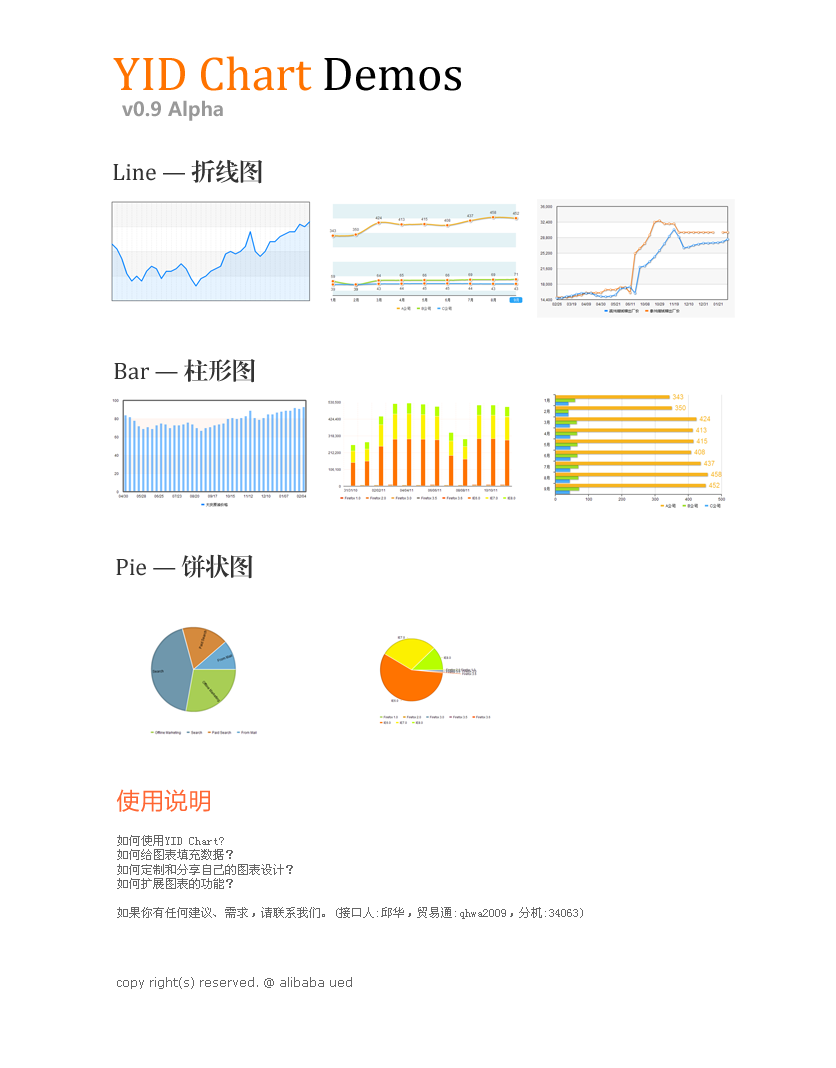
<style>
.page{position:relative;width:836px;height:1068px;background:#ffffff}
.page>*{position:absolute;margin:0}
.t1{font:48px "CambriaMath";color:#ff7300}
.t2{font:48px "CambriaMath";color:#000000}
.t3{font:19.1px "MicrosoftYaHei";color:#999999}
.t4{font:24px "CambriaMath";color:#333333}
.t5{font:24px "FZXBSK--GBK1-0";color:#333333}
.t6{font:24px "FZLTHK--GBK1-0";color:#ff6633}
.t7{font:12px "SimSun";color:#666666}
.t8{font:12px "Verdana";color:#666666}
</style>
<div class="page">
<p class="t1" style="left:113px;top:56px;width:348px;height:35px">YID Chart<span class="t2"> Demos</span></p>
<p class="t3" style="left:122px;top:100px;width:101px;height:21px">v0.9 Alpha</p>
<p class="t4" style="left:113px;top:159px;width:149px;height:25px">Line — <span class="t5">折线图</span></p>
<p class="t4" style="left:114px;top:359px;width:141px;height:24px">Bar — <span class="t5">柱形图</span></p>
<p class="t4" style="left:116px;top:554px;width:137px;height:25px">Pie — <span class="t5">饼状图</span></p>
<p class="t6" style="left:116px;top:789px;width:94px;height:23px">使用说明</p>
<p class="t7" style="left:117px;top:835px;width:176px;height:54px;text-align:justify">如何使用YID Chart?<br>如何给图表填充数据？<br>如何定制和分享自己的图表设计？<br>如何扩展图表的功能？</p>
<p class="t7" style="left:117px;top:907px;width:466px;height:12px">如果你有任何建议、需求，请联系我们。(接口人:邱华，贸易通:qhwa2009，分机:34063)</p>
<p class="t8" style="left:117px;top:977px;width:235px;height:12px">copy right(s) reserved. @ alibaba ued</p>
</div>
